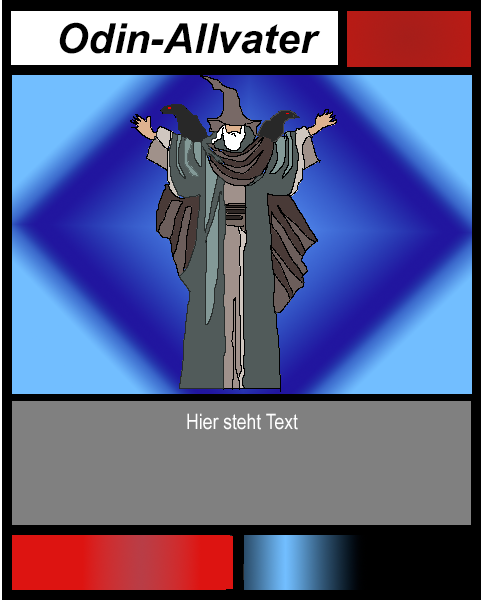
<style>
.page{position:relative;width:481px;height:600px}
.page>*{position:absolute;margin:0}
.t1{font:41.4px "Arial-BoldItalicMT";color:#000000}
.t2{font:21.3px "ArialNarrow";color:#ffffff}
</style>
<div class="page">
<p class="t1" style="left:59px;top:22px;width:262px;height:32px">Odin-Allvater</p>
<p class="t2" style="left:187px;top:413px;width:111px;height:17px">Hier steht Text</p>
</div>
